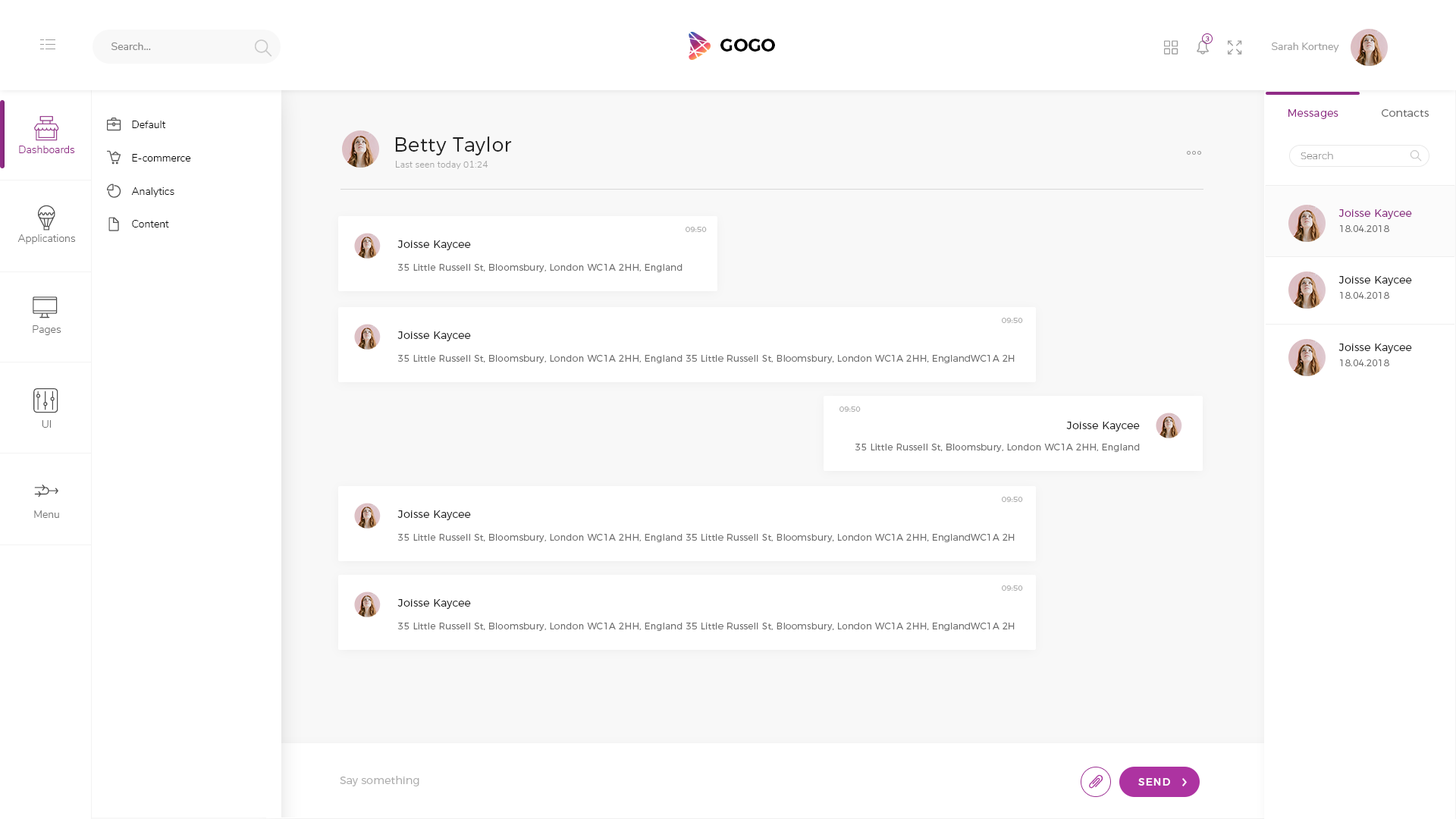
<style>
.page{position:relative;width:1456px;height:819px;background:#ffffff}
.page>*{position:absolute;margin:0}
.t1{font:18.2px "Montserrat-SemiBold";color:#000000}
.t2{font:6.8px "Nunito-Regular";letter-spacing:0.02em;color:#98418f}
.t3{font:10.6px "Nunito-Regular";color:#898989}
.t4{font:10.6px "Nunito-Regular";color:#a0a0a0}
.t5{font:10.6px "Montserrat-Light";letter-spacing:0.02em;color:#902b86}
.t6{font:10.6px "Montserrat-Light";letter-spacing:0.02em;color:#676767}
.t7{font:10.6px "Nunito-Light";color:#000000}
.t8{font:19.7px "Montserrat-Light";letter-spacing:0.02em;color:#212121}
.t9{font:10.6px "Nunito-Light";color:#922c88}
.t10{font:9.1px "Nunito-Light";letter-spacing:0.02em;color:#a4a4a4}
.t11{font:9.9px "Montserrat-Light";color:#828282}
.t12{font:10.6px "Montserrat-Light";letter-spacing:0.02em;color:#88297f}
.t13{font:7.6px "Montserrat-Light";letter-spacing:0.02em;color:#b0b0b0}
.t14{font:9.1px "Montserrat-Light";letter-spacing:0.02em;color:#717171}
.t15{font:10.6px "Nunito-Light";color:#737373}
.t16{font:10.6px "Montserrat-Light";letter-spacing:0.02em;color:#212121}
.t17{font:10.6px "Montserrat-Light";letter-spacing:0.02em;color:#acacac}
.t18{font:10.6px "Montserrat-Medium";letter-spacing:0.06em;color:#ffffff}
</style>
<div class="page">
<p class="t1" style="left:720px;top:39px;width:55px;height:13px">GOGO</p>
<p class="t2" style="left:1206px;top:36px;width:4px;height:6px">3</p>
<p class="t3" style="left:111px;top:42px;width:40px;height:8px">Search...</p>
<p class="t4" style="left:1272px;top:42px;width:67px;height:10px">Sarah Kortney</p>
<p class="t5" style="left:1288px;top:109px;width:50px;height:10px">Messages</p>
<p class="t6" style="left:1382px;top:109px;width:47px;height:8px">Contacts</p>
<p class="t7" style="left:132px;top:121px;width:34px;height:7px">Default</p>
<p class="t8" style="left:395px;top:136px;width:117px;height:19px">Betty Taylor</p>
<p class="t9" style="left:19px;top:146px;width:56px;height:7px">Dashboards</p>
<p class="t7" style="left:132px;top:154px;width:59px;height:8px">E-commerce</p>
<p class="t10" style="left:396px;top:161px;width:92px;height:8px">Last seen today 01:24</p>
<p class="t11" style="left:1301px;top:152px;width:32px;height:7px">Search</p>
<p class="t7" style="left:131px;top:187px;width:43px;height:10px">Analytics</p>
<p class="t12" style="left:1338px;top:209px;width:74px;height:10px">Joisse Kaycee</p>
<p class="t7" style="left:132px;top:220px;width:37px;height:7px">Content</p>
<p class="t13" style="left:686px;top:227px;width:21px;height:5px">09:50</p>
<p class="t14" style="left:1340px;top:225px;width:49px;height:7px">18.04.2018</p>
<p class="t15" style="left:17px;top:234px;width:59px;height:10px">Applications</p>
<p class="t16" style="left:397px;top:240px;width:74px;height:10px">Joisse Kaycee</p>
<p class="t14" style="left:398px;top:264px;width:284px;height:8px">35 Little Russell St, Bloomsbury, London WC1A 2HH, England</p>
<p class="t16" style="left:1338px;top:276px;width:74px;height:10px">Joisse Kaycee</p>
<p class="t14" style="left:1340px;top:292px;width:49px;height:7px">18.04.2018</p>
<p class="t13" style="left:1002px;top:318px;width:21px;height:5px">09:50</p>
<p class="t15" style="left:33px;top:325px;width:28px;height:10px">Pages</p>
<p class="t16" style="left:397px;top:331px;width:74px;height:10px">Joisse Kaycee</p>
<p class="t16" style="left:1338px;top:344px;width:74px;height:9px">Joisse Kaycee</p>
<p class="t14" style="left:397px;top:355px;width:618px;height:8px">35 Little Russell St, Bloomsbury, London WC1A 2HH, England 35 Little Russell St, Bloomsbury, London WC1A 2HH, EnglandWC1A 2H</p>
<p class="t14" style="left:1340px;top:359px;width:49px;height:7px">18.04.2018</p>
<p class="t13" style="left:839px;top:406px;width:22px;height:6px">09:50</p>
<p class="t15" style="left:42px;top:420px;width:9px;height:8px">UI</p>
<p class="t16" style="left:1066px;top:422px;width:74px;height:9px">Joisse Kaycee</p>
<p class="t14" style="left:855px;top:444px;width:285px;height:8px">35 Little Russell St, Bloomsbury, London WC1A 2HH, England</p>
<p class="t13" style="left:1002px;top:497px;width:21px;height:5px">09:50</p>
<p class="t15" style="left:34px;top:510px;width:25px;height:8px">Menu</p>
<p class="t16" style="left:397px;top:510px;width:74px;height:10px">Joisse Kaycee</p>
<p class="t14" style="left:397px;top:534px;width:618px;height:8px">35 Little Russell St, Bloomsbury, London WC1A 2HH, England 35 Little Russell St, Bloomsbury, London WC1A 2HH, EnglandWC1A 2H</p>
<p class="t13" style="left:1002px;top:585px;width:21px;height:6px">09:50</p>
<p class="t16" style="left:397px;top:599px;width:74px;height:10px">Joisse Kaycee</p>
<p class="t14" style="left:397px;top:623px;width:618px;height:8px">35 Little Russell St, Bloomsbury, London WC1A 2HH, England 35 Little Russell St, Bloomsbury, London WC1A 2HH, EnglandWC1A 2H</p>
<p class="t17" style="left:340px;top:776px;width:79px;height:10px">Say something</p>
<p class="t18" style="left:1138px;top:778px;width:32px;height:8px">SEND</p>
</div>
